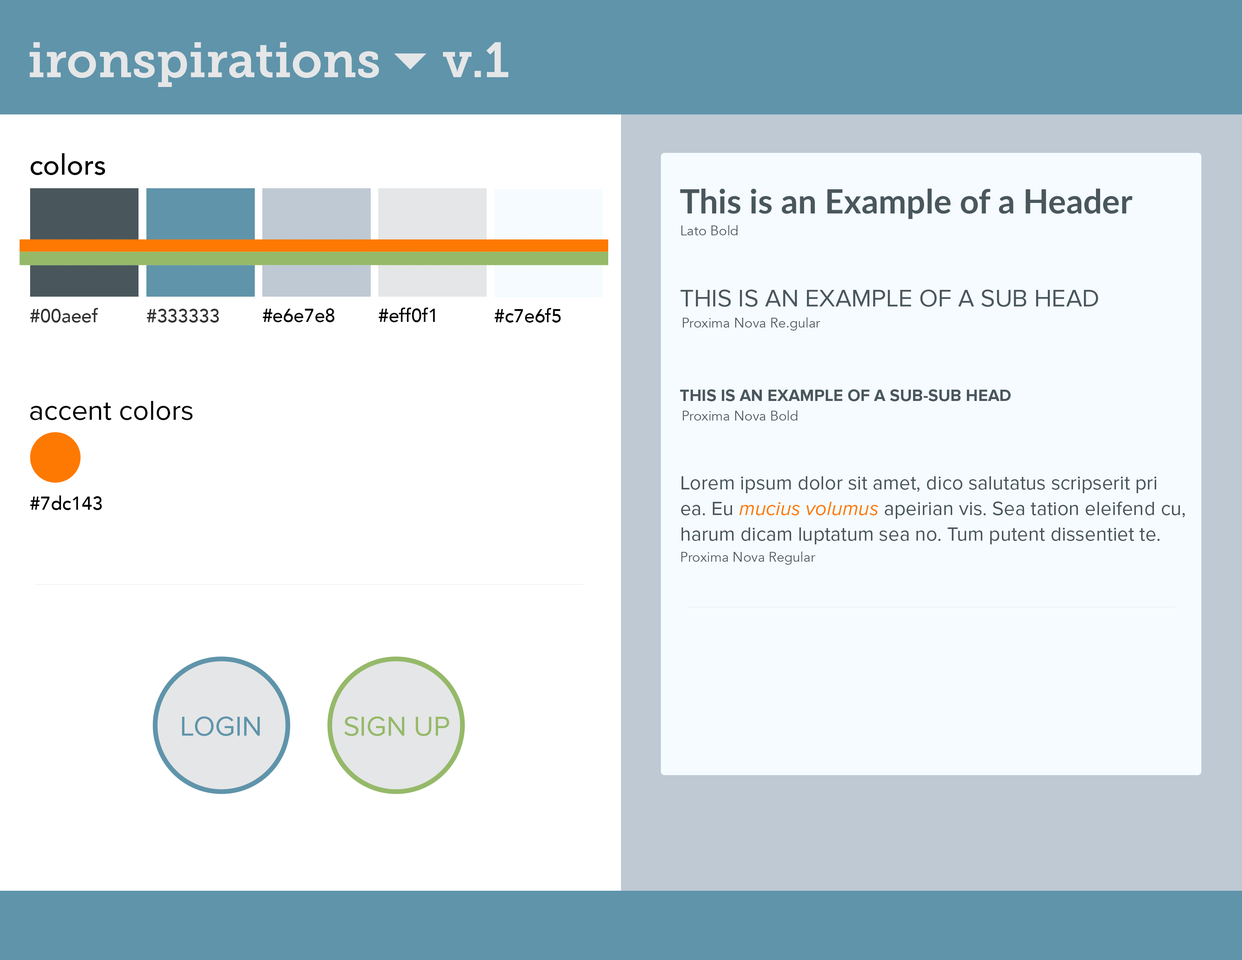
<style>
.page{position:relative;width:1242px;height:960px;background:#ffffff}
.page>*{position:absolute;margin:0}
.t1{font:49.3px "MuseoSlab-700";color:#e5e6e7}
.t2{font:28.2px "Avenir-Medium";color:#030000}
.t3{font:33.4px "Lato-Bold";color:#49575d}
.t4{font:13.6px "Avenir-Book";color:#49575d}
.t5{font:24.7px "ProximaNova-Regular";color:#49575d;text-transform:uppercase}
.t6{font:18.8px "Avenir-Medium";color:#313131}
.t7{font:18.8px "Avenir-Medium";color:#333333}
.t8{font:18.8px "Avenir-Medium";color:#030000}
.t9{font:18.8px "Avenir-Medium";color:#000102}
.t10{font:16.7px "ProximaNova-Bold";color:#49575d}
.t11{font:28.2px "ProximaNova-Regular";color:#030000}
.t12{font:19.9px/25.6px "ProximaNova-Regular";color:#49575d}
.t13{font:19.9px/25.6px "ProximaNova-RegularIt";color:#fe7902}
.t14{font:28.2px "ProximaNova-Regular";color:#5f94aa}
.t15{font:28.2px "ProximaNova-Regular";color:#95b969}
</style>
<div class="page">
<p class="t1" style="left:29px;top:42px;width:480px;height:45px">ironspirations     v.1</p>
<p class="t2" style="left:30px;top:153px;width:75px;height:22px">colors</p>
<p class="t3" style="left:680px;top:189px;width:453px;height:30px">This is an Example of a Header</p>
<p class="t4" style="left:681px;top:225px;width:57px;height:10px">Lato Bold</p>
<p class="t5" style="left:681px;top:289px;width:417px;height:18px">This is an Example of a Sub Head</p>
<p class="t6" style="left:30px;top:308px;width:68px;height:15px">#00aeef</p>
<p class="t7" style="left:147px;top:309px;width:72px;height:14px">#333333</p>
<p class="t8" style="left:263px;top:308px;width:72px;height:14px">#e6e7e8</p>
<p class="t9" style="left:379px;top:308px;width:56px;height:14px">#eff0f1</p>
<p class="t9" style="left:495px;top:308px;width:66px;height:15px">#c7e6f5</p>
<p class="t4" style="left:683px;top:317px;width:138px;height:14px">Proxima Nova Re.gular</p>
<p class="t10" style="left:680px;top:389px;width:331px;height:12px">THIS IS AN EXAMPLE OF A SUB-SUB HEAD</p>
<p class="t11" style="left:30px;top:401px;width:163px;height:19px">accent colors</p>
<p class="t4" style="left:683px;top:410px;width:115px;height:10px">Proxima Nova Bold</p>
<p class="t12" style="left:681px;top:476px;width:504px;height:68px">Lorem ipsum dolor sit amet, dico salutatus scripserit pri ea. Eu <span class="t13">mucius volumus</span> apeirian vis. Sea tation eleifend cu, harum dicam luptatum sea no. Tum putent dissentiet te.</p>
<p class="t9" style="left:30px;top:495px;width:72px;height:15px">#7dc143</p>
<p class="t4" style="left:681px;top:551px;width:135px;height:14px">Proxima Nova Regular</p>
<p class="t14" style="left:182px;top:716px;width:78px;height:20px">LOGIN</p>
<p class="t15" style="left:344px;top:716px;width:105px;height:20px">SIGN UP</p>
</div>
